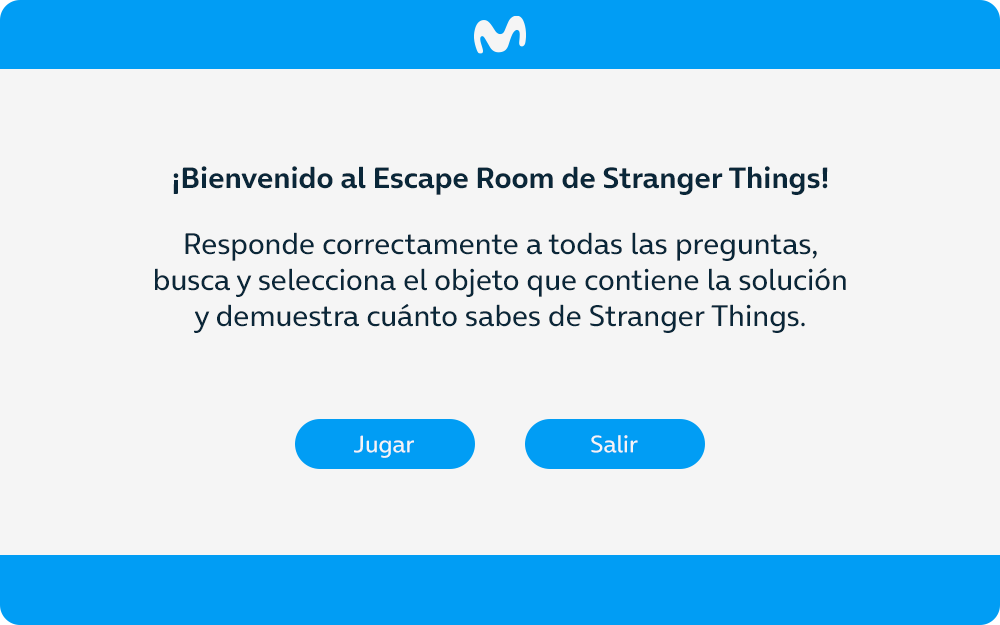
<style>
.page{position:relative;width:1000px;height:625px;background:#f5f5f5}
.page>*{position:absolute;margin:0}
.t1{font:30px "OnAir-Bold";color:#0a2739}
.t2{font:30px "OnAir-Regular";color:#0a2739}
.t3{font:24px "OnAir-Regular";color:#f5f5f5}
</style>
<div class="page">
<p class="t1" style="left:173px;top:166px;width:655px;height:29px">¡Bienvenido al Escape Room de Stranger Things!</p>
<p class="t2" style="left:155px;top:232px;width:691px;height:101px;text-align:center">Responde correctamente a todas las preguntas,<br>busca y selecciona el objeto que contiene la solución<br>y demuestra cuánto sabes de Stranger Things.</p>
<p class="t3" style="left:354px;top:435px;width:60px;height:23px">Jugar</p>
<p class="t3" style="left:591px;top:435px;width:47px;height:18px">Salir</p>
</div>
